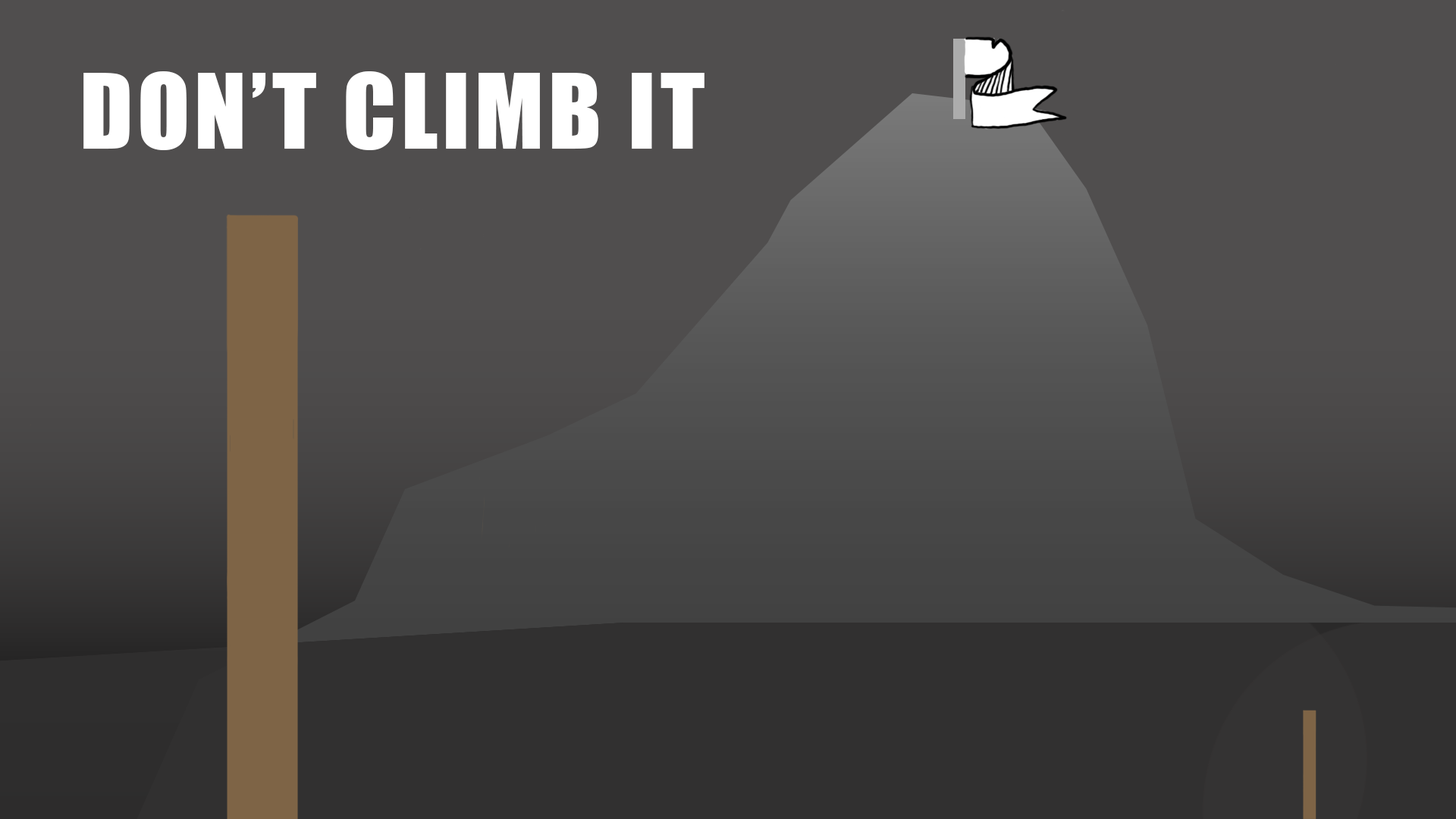
<style>
.page{position:relative;width:1456px;height:819px;background:#504e4e}
.page>*{position:absolute;margin:0}
.t1{font:96px "Impact";letter-spacing:0.05em;color:#ffffff}
</style>
<div class="page">
<p class="t1" style="left:83px;top:71px;width:621px;height:79px">DON’T CLIMB IT</p>
</div>
